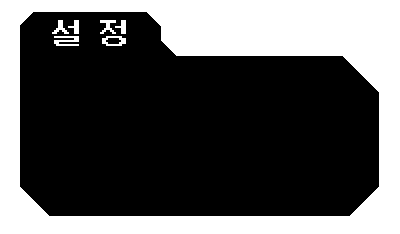
<style>
.page{position:relative;width:400px;height:234px;background:#000000}
.page>*{position:absolute;margin:0}
.t1{font:31.6px "NeoDunggeunmo-Regular";color:#ffffff}
</style>
<div class="page">
<p class="t1" style="left:52px;top:20px;width:74px;height:26px">설 정</p>
</div>
